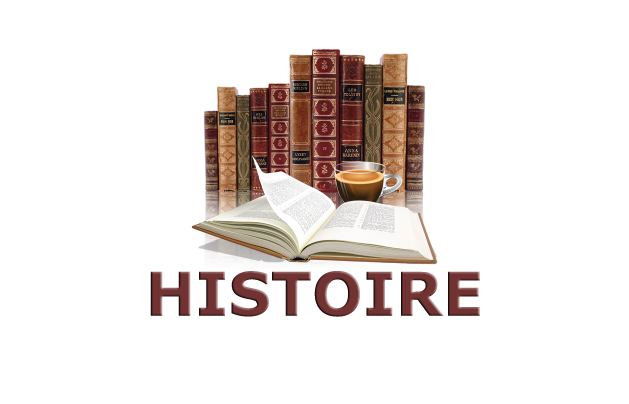
<style>
.page{position:relative;width:629px;height:404px;background:#ffffff}
.page>*{position:absolute;margin:0}
.t1{font:60px "Verdana-Bold";color:#713232}
</style>
<div class="page">
<p class="t1" style="left:150px;top:271px;width:330px;height:46px">HISTOIRE</p>
</div>
